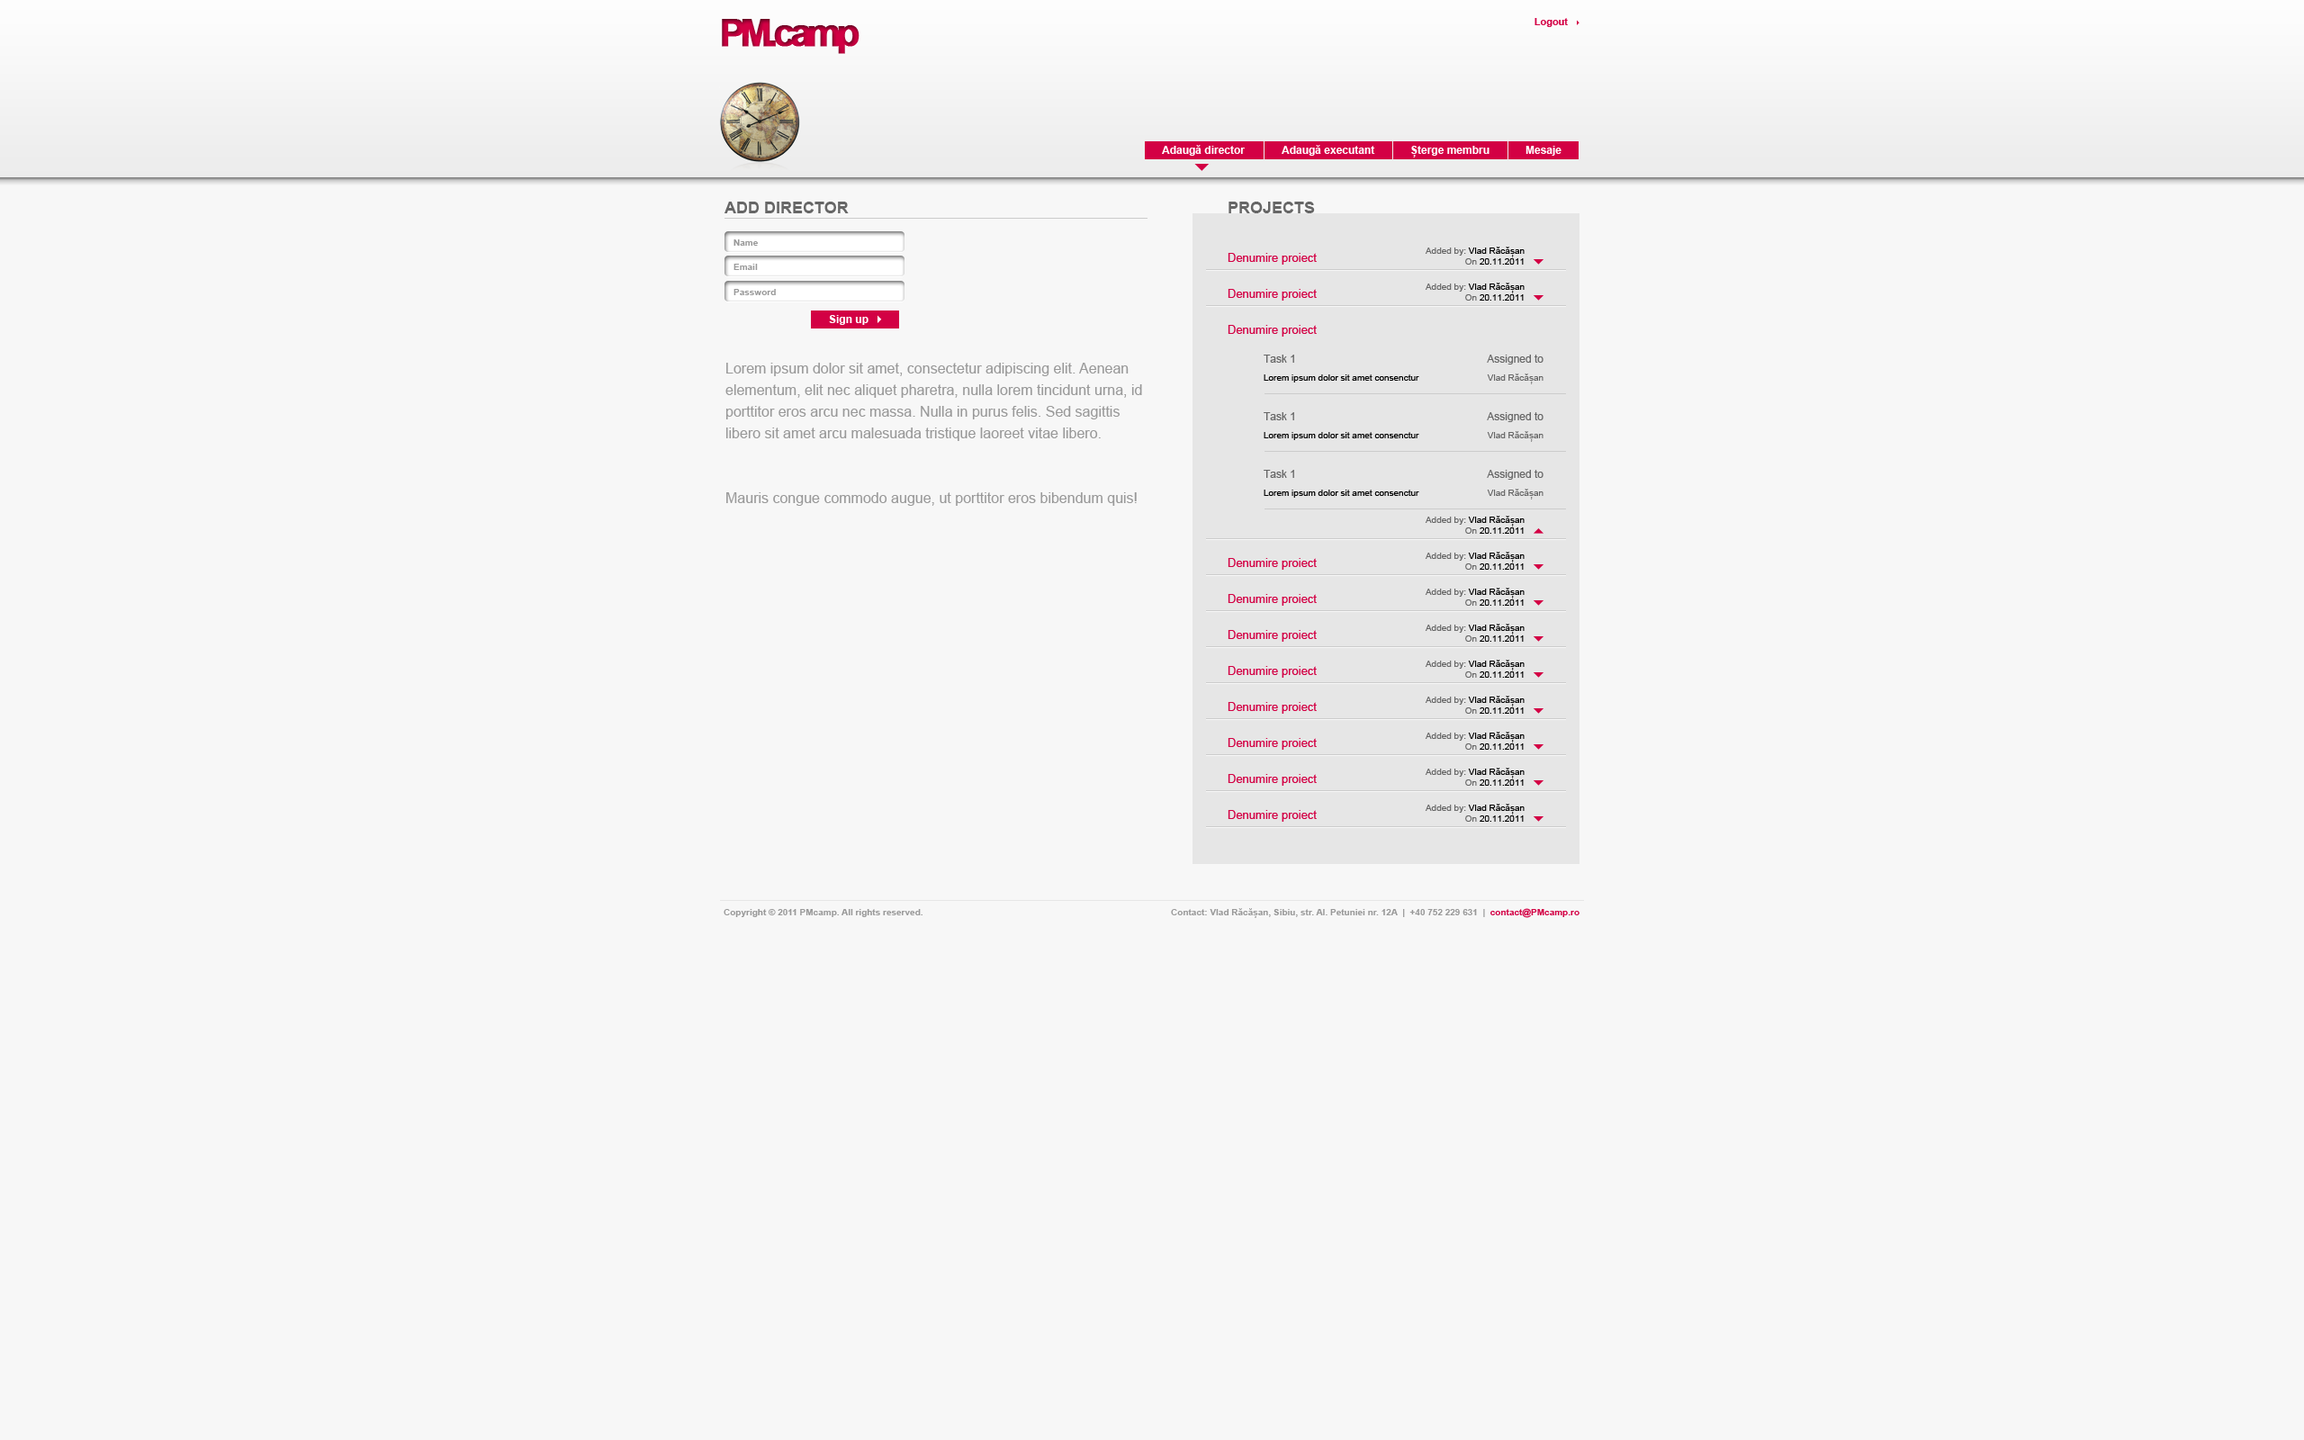
<style>
.page{position:relative;width:2304px;height:1440px;background:#f7f7f7}
.page>*{position:absolute;margin:0}
.t1{font:38.1px "Arial-BoldMT";letter-spacing:-0.146em;font-weight:bold}
.t2{font:9.9px "Arial-BoldMT";color:#d30044}
.t3{font:10.8px "Arial-BoldMT";color:#ffffff}
.t4{font:16.2px "Arial-BoldMT";color:#666666}
.t5{font:9px "Arial-BoldMT";color:#999999}
.t6{font:11.7px "ArialMT";color:#d30044}
.t7{font:9px/10.8px "ArialMT";color:#000000}
.t8{font:9px/10.8px "ArialMT";color:#666666}
.t9{font:14.4px/21.6px "ArialMT";color:#999999}
.t10{font:9px/18px "ArialMT";color:#000000}
.t11{font:10.8px/18px "ArialMT";color:#666666}
.t12{font:9px/18px "ArialMT";color:#666666}
.t13{font:9px "Arial-BoldMT";color:#d30044}
</style>
<div class="page">
<p class="t1" style="left:722px;top:19px;width:138px;height:35px">PM.camp</p>
<p class="t2" style="left:1534px;top:18px;width:34px;height:9px">Logout</p>
<p class="t3" style="left:1162px;top:145px;width:83px;height:11px">Adaugă director</p>
<p class="t3" style="left:1282px;top:145px;width:93px;height:11px">Adaugă executant</p>
<p class="t3" style="left:1411px;top:146px;width:79px;height:12px">Șterge membru</p>
<p class="t3" style="left:1526px;top:146px;width:36px;height:10px">Mesaje</p>
<p class="t4" style="left:724px;top:202px;width:125px;height:11px">ADD DIRECTOR</p>
<p class="t4" style="left:1228px;top:202px;width:87px;height:11px">PROJECTS</p>
<p class="t5" style="left:734px;top:239px;width:24px;height:7px">Name</p>
<p class="t6" style="left:1228px;top:253px;width:89px;height:12px">Denumire proiect</p>
<p class="t7" style="left:1425px;top:247px;width:100px;height:18px;text-align:right"><span class="t8">Added by: </span>Vlad Răcășan<span class="t8"><br>On </span>20.11.2011</p>
<p class="t5" style="left:734px;top:264px;width:24px;height:6px">Email</p>
<p class="t5" style="left:734px;top:289px;width:42px;height:6px">Password</p>
<p class="t6" style="left:1228px;top:289px;width:89px;height:12px">Denumire proiect</p>
<p class="t7" style="left:1425px;top:283px;width:100px;height:18px;text-align:right"><span class="t8">Added by: </span>Vlad Răcășan<span class="t8"><br>On </span>20.11.2011</p>
<p class="t3" style="left:829px;top:315px;width:39px;height:10px">Sign up</p>
<p class="t6" style="left:1228px;top:325px;width:89px;height:12px">Denumire proiect</p>
<p class="t9" style="left:725px;top:363px;width:417px;height:143px">Lorem ipsum dolor sit amet, consectetur adipiscing elit. Aenean elementum, elit nec aliquet pharetra, nulla lorem tincidunt urna, id porttitor eros arcu nec massa. Nulla in purus felis. Sed sagittis libero sit amet arcu malesuada tristique laoreet vitae libero. <br><br><br>Mauris congue commodo augue, ut porttitor eros bibendum quis!</p>
<p class="t10" style="left:1264px;top:355px;width:155px;height:27px"><span class="t11">Task 1<br></span>Lorem ipsum dolor sit amet consenctur</p>
<p class="t12" style="left:1487px;top:355px;width:57px;height:29px;text-align:right"><span class="t11">Assigned to<br></span>Vlad Răcășan</p>
<p class="t10" style="left:1264px;top:412px;width:155px;height:28px"><span class="t11">Task 1<br></span>Lorem ipsum dolor sit amet consenctur</p>
<p class="t12" style="left:1487px;top:412px;width:57px;height:30px;text-align:right"><span class="t11">Assigned to<br></span>Vlad Răcășan</p>
<p class="t10" style="left:1264px;top:470px;width:155px;height:28px"><span class="t11">Task 1<br></span>Lorem ipsum dolor sit amet consenctur</p>
<p class="t12" style="left:1487px;top:470px;width:57px;height:30px;text-align:right"><span class="t11">Assigned to<br></span>Vlad Răcășan</p>
<p class="t7" style="left:1425px;top:516px;width:100px;height:18px;text-align:right"><span class="t8">Added by: </span>Vlad Răcășan<span class="t8"><br>On </span>20.11.2011</p>
<p class="t6" style="left:1228px;top:558px;width:89px;height:12px">Denumire proiect</p>
<p class="t7" style="left:1425px;top:552px;width:100px;height:18px;text-align:right"><span class="t8">Added by: </span>Vlad Răcășan<span class="t8"><br>On </span>20.11.2011</p>
<p class="t7" style="left:1425px;top:588px;width:100px;height:18px;text-align:right"><span class="t8">Added by: </span>Vlad Răcășan<span class="t8"><br>On </span>20.11.2011</p>
<p class="t6" style="left:1228px;top:594px;width:89px;height:12px">Denumire proiect</p>
<p class="t6" style="left:1228px;top:630px;width:89px;height:12px">Denumire proiect</p>
<p class="t7" style="left:1425px;top:624px;width:100px;height:18px;text-align:right"><span class="t8">Added by: </span>Vlad Răcășan<span class="t8"><br>On </span>20.11.2011</p>
<p class="t7" style="left:1425px;top:660px;width:100px;height:18px;text-align:right"><span class="t8">Added by: </span>Vlad Răcășan<span class="t8"><br>On </span>20.11.2011</p>
<p class="t6" style="left:1228px;top:666px;width:89px;height:12px">Denumire proiect</p>
<p class="t6" style="left:1228px;top:702px;width:89px;height:12px">Denumire proiect</p>
<p class="t7" style="left:1425px;top:696px;width:100px;height:18px;text-align:right"><span class="t8">Added by: </span>Vlad Răcășan<span class="t8"><br>On </span>20.11.2011</p>
<p class="t7" style="left:1425px;top:732px;width:100px;height:18px;text-align:right"><span class="t8">Added by: </span>Vlad Răcășan<span class="t8"><br>On </span>20.11.2011</p>
<p class="t6" style="left:1228px;top:738px;width:89px;height:12px">Denumire proiect</p>
<p class="t6" style="left:1228px;top:774px;width:89px;height:12px">Denumire proiect</p>
<p class="t7" style="left:1425px;top:768px;width:100px;height:18px;text-align:right"><span class="t8">Added by: </span>Vlad Răcășan<span class="t8"><br>On </span>20.11.2011</p>
<p class="t7" style="left:1425px;top:804px;width:100px;height:18px;text-align:right"><span class="t8">Added by: </span>Vlad Răcășan<span class="t8"><br>On </span>20.11.2011</p>
<p class="t6" style="left:1228px;top:810px;width:89px;height:12px">Denumire proiect</p>
<p class="t5" style="left:724px;top:909px;width:198px;height:8px">Copyright © 2011 PMcamp. All rights reserved.</p>
<p class="t5" style="left:1171px;top:908px;width:409px;height:10px">Contact: Vlad Răcășan, Sibiu, str. Al. Petuniei nr. 12A  |  +40 752 229 631  |  <span class="t13">contact@PMcamp.ro</span></p>
</div>
